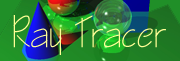
<style>
.page{position:relative;width:180px;height:61px}
.page>*{position:absolute;margin:0}
.t1{font:40px "CityBlueprint";color:#fffe97}
</style>
<div class="page">
<p class="t1" style="left:13px;top:15px;width:153px;height:40px">Ray Tracer</p>
</div>
